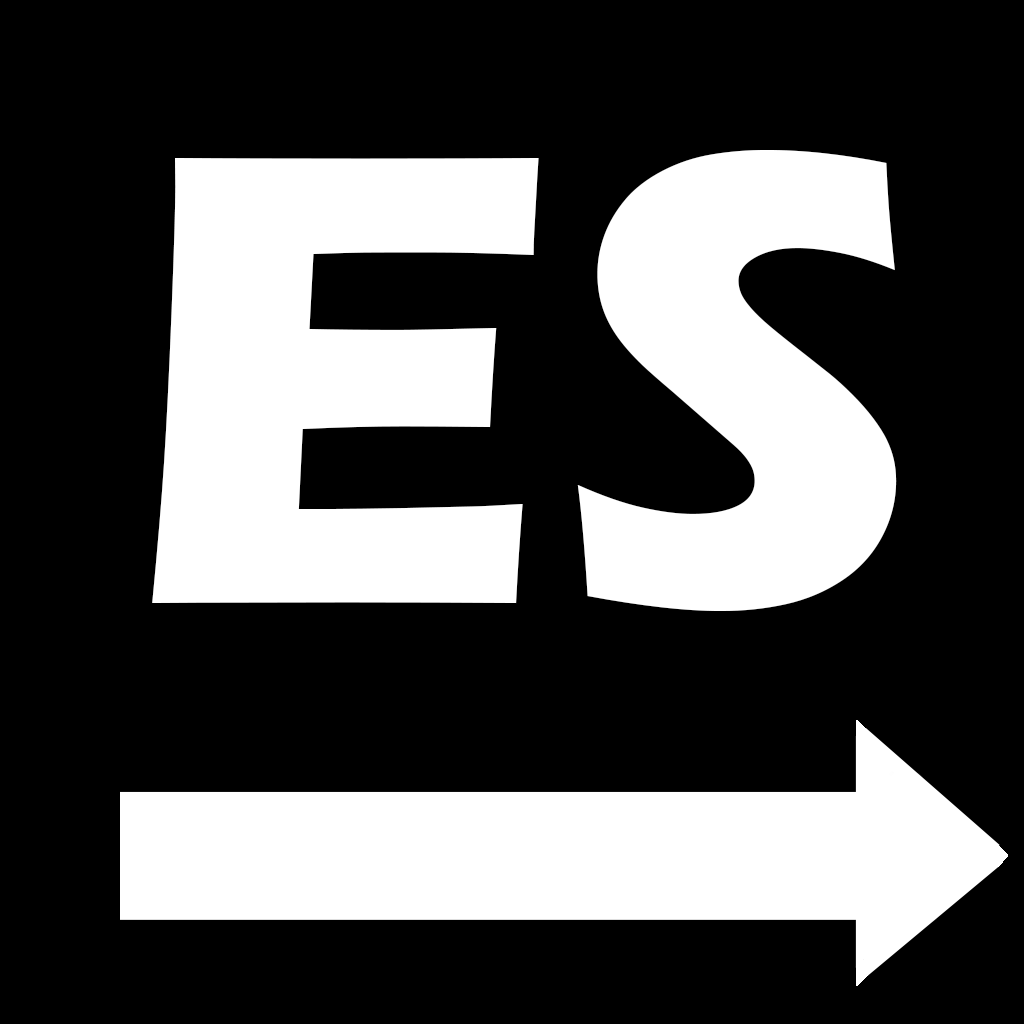
<style>
.page{position:relative;width:1024px;height:1024px;background:#000000}
.page>*{position:absolute;margin:0}
.t1{font:666.7px "ErasITC-Bold";color:#ffffff}
</style>
<div class="page">
<p class="t1" style="left:152px;top:150px;width:745px;height:461px">ES</p>
</div>
